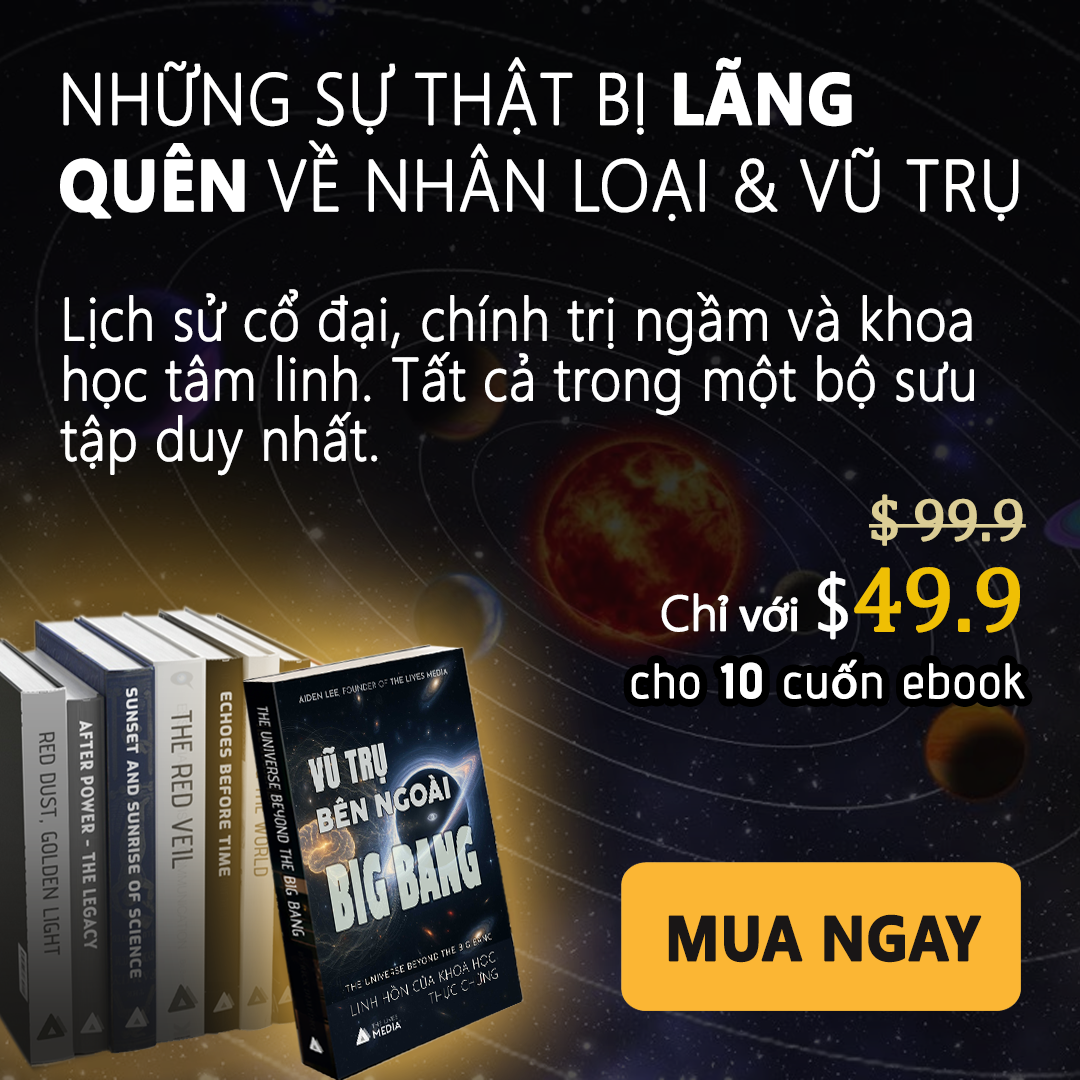
<style>
.page{position:relative;width:1080px;height:1080px}
.page>*{position:absolute;margin:0}
.t1{font:72px "SegoeUI-Light";letter-spacing:0.005em;color:#ffffff;font-weight:bold;scale:0.91 1}
.t2{font:72px "SegoeUI-Bold";letter-spacing:0.005em;color:#ffffff;font-weight:bold;scale:0.91 1}
.t3{font:60px/60px "SegoeUI-Light";letter-spacing:0.005em;color:#ffffff;font-weight:bold;scale:0.9 1}
.t4{font:60px "Cambria";letter-spacing:-0.025em;color:#dbcd95;font-weight:bold}
.t5{font:60px "Cambria";letter-spacing:-0.025em;color:#efbf04;font-weight:bold}
.t6{font:48px "MyriadPro-Regular";letter-spacing:-0.025em;color:#ffffff;font-weight:bold}
.t7{font:48px "MalgunGothic-Semilight";letter-spacing:-0.025em;color:#ffffff;font-weight:bold}
.t8{font:72px "MalgunGothic-Semilight";letter-spacing:-0.025em;color:#ffffff;font-weight:bold}
.t9{font:92px "Cambria";letter-spacing:-0.025em;color:#efbf04;font-weight:bold}
.t10{font:48px "AdventPro-Regular";letter-spacing:0.05em;color:#ffffff;font-weight:bold}
.t11{font:48px "AdventPro-Bold";letter-spacing:0.05em;color:#ffffff;font-weight:bold}
.t12{font:48px "MyriadPro-Regular";letter-spacing:0.05em;color:#ffffff;font-weight:bold}
.t13{font:63px "SegoeUI-Bold";color:#191616;font-weight:bold;scale:0.9 1}
</style>
<div class="page">
<p class="t1" style="left:60px;top:57px;width:959px;height:165px">NHỮNG SỰ THẬT BỊ <span class="t2">LÃNG QUÊN </span>VỀ NHÂN LOẠI &amp; VŨ TRỤ</p>
<p class="t3" style="left:60px;top:289px;width:914px;height:187px">Lịch sử cổ đại, chính trị ngầm và khoa học tâm linh. Tất cả trong một bộ sưu tập duy nhất.</p>
<p class="t4" style="left:869px;top:494px;width:157px;height:52px"><span class="t5"> </span>$ 99.9</p>
<p class="t6" style="left:661px;top:567px;width:359px;height:73px"><span class="t7">Ch</span>ỉ với <span class="t8">$</span><span class="t9">49.9</span></p>
<p class="t10" style="left:631px;top:659px;width:394px;height:40px">cho <span class="t11">10</span> cu<span class="t12">ố</span>n ebook</p>
<p class="t13" style="left:668px;top:914px;width:314px;height:49px">MUA NGAY</p>
</div>
